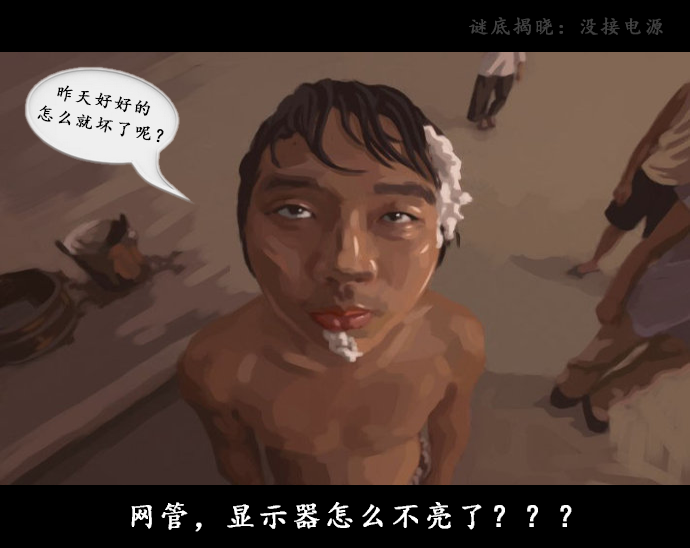
<style>
.page{position:relative;width:690px;height:548px}
.page>*{position:absolute;margin:0}
.t1{font:20px "¿¬Ìå";letter-spacing:0.1em;color:#404040;font-weight:bold}
.t2{font:18px/24px "¿¬Ìå";letter-spacing:0.1em;color:#000000;font-weight:bold}
.t3{font:30px "¿¬Ìå";letter-spacing:0.1em;color:#ffffff;font-weight:bold}
</style>
<div class="page">
<p class="t1" style="left:469px;top:17px;width:194px;height:18px">谜底揭晓：没接电源</p>
<p class="t2" style="left:37px;top:85px;width:127px;height:58px;text-align:center;rotate:11deg">昨天好好的 <br>怎么就坏了呢？</p>
<p class="t3" style="left:131px;top:502px;width:441px;height:30px">网管，显示器怎么不亮了？？？</p>
</div>
